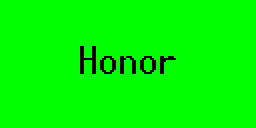
<style>
.page{position:relative;width:256px;height:128px;background:#00ff00}
.page>*{position:absolute;margin:0}
.t1{font:36px "Terminal";color:#000000}
</style>
<div class="page">
<p class="t1" style="left:80px;top:46px;width:96px;height:28px">Honor</p>
</div>
